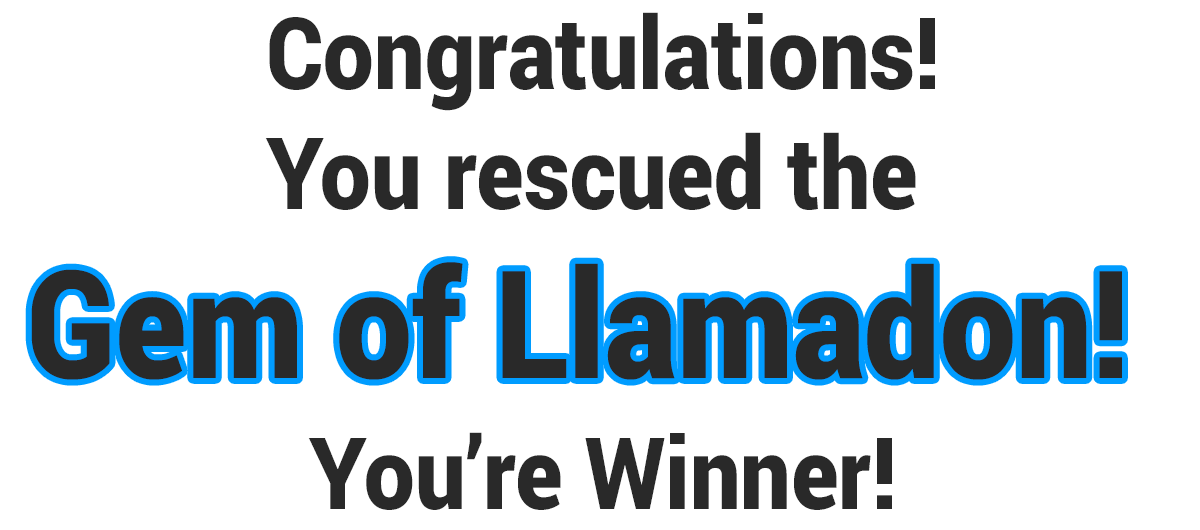
<style>
.page{position:relative;width:1200px;height:530px;background:#ffffff}
.page>*{position:absolute;margin:0}
.t1{font:100px "Roboto-Black";color:#292929;scale:0.9 1}
.t2{font:150px "Roboto-Black";color:#292929;scale:0.9 1}
</style>
<div class="page">
<p class="t1" style="left:265px;top:12px;width:670px;height:498px;text-align:center">Congratulations!<br>You rescued the <br><br>You’re Winner!</p>
<p class="t2" style="left:31px;top:262px;width:1091px;height:118px">Gem of Llamadon!</p>
</div>
